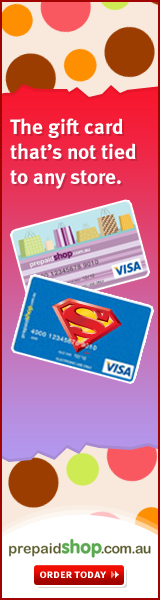
<style>
.page{position:relative;width:160px;height:600px}
.page>*{position:absolute;margin:0}
.t1{font:21px "MetaBoldLF-Roman";color:#ffffff}
.t2{font:11.7px "MetaBoldLF-Caps";color:#ffffff}
</style>
<div class="page">
<p class="t1" style="left:10px;top:118px;width:126px;height:71px">The gift card<br>that’s not tied<br>to any store.</p>
<p class="t2" style="left:40px;top:571px;width:67px;height:7px">order today</p>
</div>
